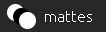
<style>
.page{position:relative;width:106px;height:32px;background:#282828}
.page>*{position:absolute;margin:0}
.t1{font:16px "Ubuntu";color:#ffffff}
</style>
<div class="page">
<p class="t1" style="left:45px;top:11px;width:47px;height:11px">mattes</p>
</div>
